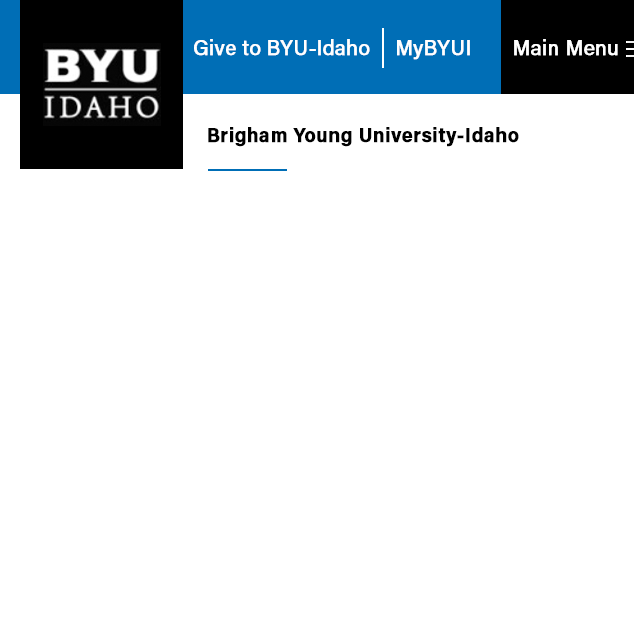
<style>
.page{position:relative;width:634px;height:628px;background:#ffffff}
.page>*{position:absolute;margin:0}
.t1{font:21.2px "AcuminPro-Regular";color:#ffffff;font-weight:bold;scale:0.97 1}
.t2{font:20px "AcuminPro-Bold";letter-spacing:0.01em;color:#010101;font-weight:bold;scale:0.97 1}
</style>
<div class="page">
<p class="t1" style="left:194px;top:39px;width:176px;height:17px">Give to BYU-Idaho</p>
<p class="t1" style="left:397px;top:40px;width:73px;height:20px">MyBYUI</p>
<p class="t1" style="left:514px;top:39px;width:104px;height:17px">Main Menu</p>
<p class="t2" style="left:208px;top:127px;width:311px;height:20px">Brigham Young University-Idaho</p>
</div>
